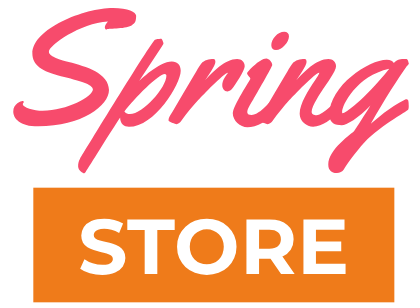
<style>
.page{position:relative;width:420px;height:308px;background:#ffffff}
.page>*{position:absolute;margin:0}
.t1{font:163.6px "Yellowtail";color:#f74b6c}
.t2{font:77.7px "Montserrat-Bold";color:#ffffff;text-transform:uppercase}
</style>
<div class="page">
<p class="t1" style="left:13px;top:7px;width:396px;height:167px">Spring</p>
<p class="t2" style="left:80px;top:218px;width:266px;height:57px">Store</p>
</div>
